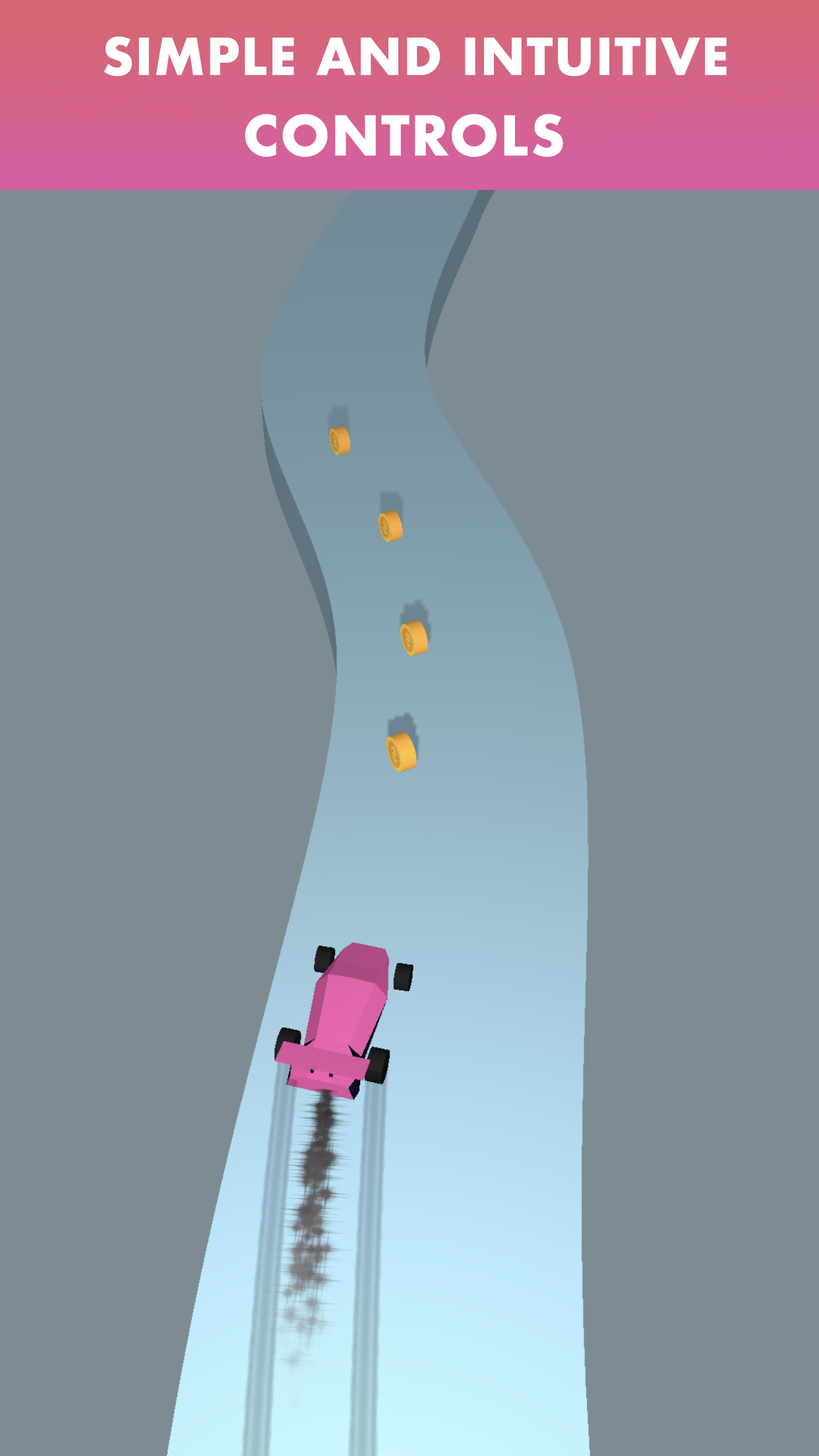
<style>
.page{position:relative;width:819px;height:1456px;background:#7d8c93}
.page>*{position:absolute;margin:0}
.t1{font:49.5px "Futura-Bold";letter-spacing:0.025em;color:#ffffff}
.t2{font:53.4px "Futura-Bold";letter-spacing:0.025em;color:#ffffff}
</style>
<div class="page">
<p class="t1" style="left:104px;top:36px;width:623px;height:40px">SIMPLE AND INTUITIVE</p>
<p class="t2" style="left:245px;top:114px;width:318px;height:43px">CONTROLS</p>
</div>
